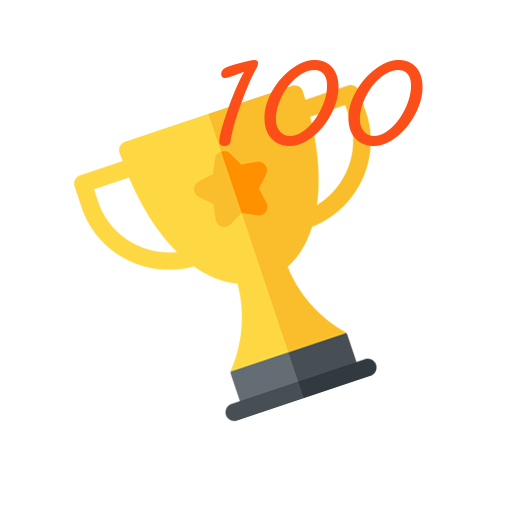
<style>
.page{position:relative;width:512px;height:512px;background:#ffffff}
.page>*{position:absolute;margin:0}
.t1{font:120px "MVBoli";color:#fb4e19}
</style>
<div class="page">
<p class="t1" style="left:219px;top:60px;width:204px;height:86px">100</p>
</div>
